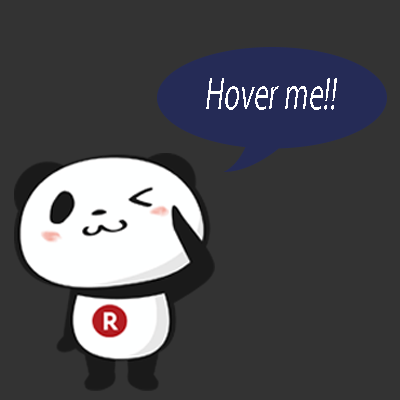
<style>
.page{position:relative;width:400px;height:400px;background:#333333}
.page>*{position:absolute;margin:0}
.t1{font:41.2px "KozGoPro-Regular";letter-spacing:0.005em;color:#ffffff;font-style:italic;scale:0.65 1}
</style>
<div class="page">
<p class="t1" style="left:206px;top:78px;width:131px;height:32px">Hover me!!</p>
</div>
